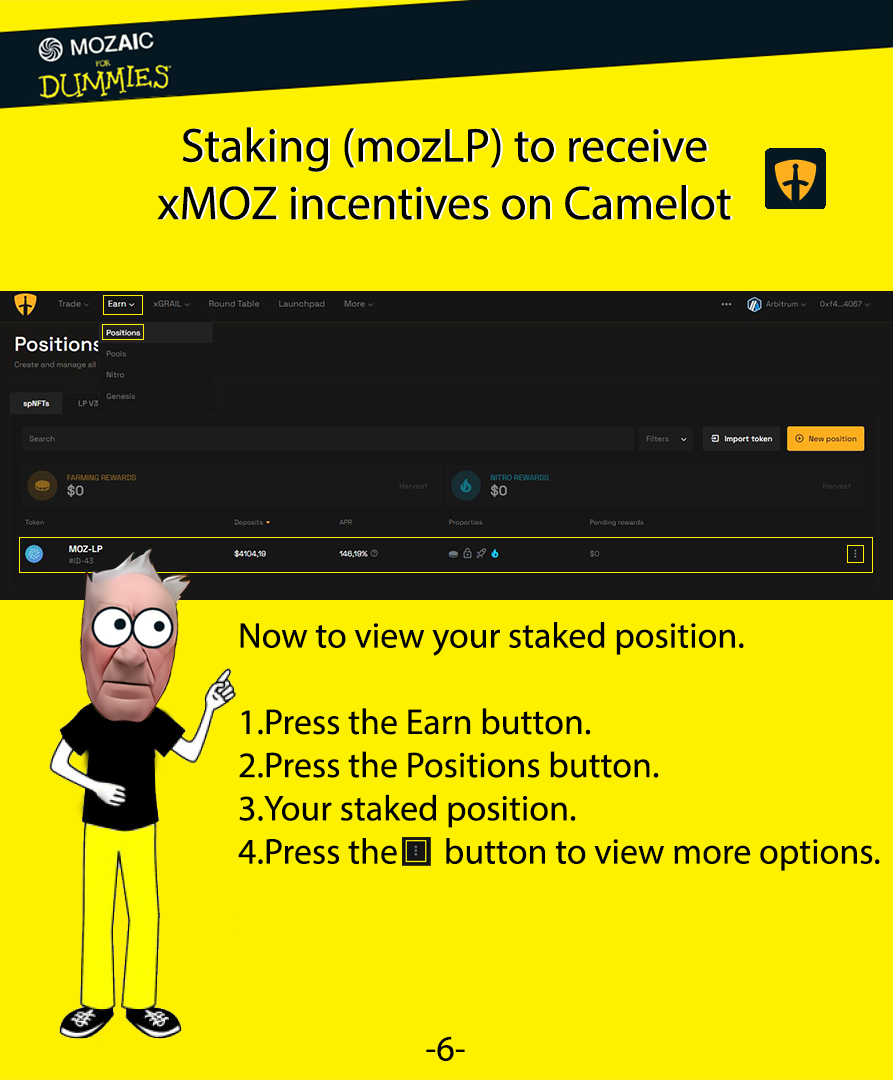
<style>
.page{position:relative;width:893px;height:1080px;background:#fdf100}
.page>*{position:absolute;margin:0}
.t1{font:48px "MyriadPro-Regular";color:#000000}
.t2{font:48px "MyriadPro-Regular"}
.t3{font:36px "MyriadPro-Regular";color:#000000}
</style>
<div class="page">
<p class="t1" style="left:157px;top:127px;width:574px;height:93px;text-align:center">Staking (mozLP) to receive <br>xMOZ incentives on Camelot</p>
<p class="t2" style="left:159px;top:127px;width:574px;height:93px;text-align:center">Staking (mozLP) to receive <br>xMOZ incentives on Camelot</p>
<p class="t3" style="left:238px;top:622px;width:642px;height:249px">Now to view your staked position.<br><br>1.Press the Earn button.<br>2.Press the Positions button.<br>3.Your staked position.<br>4.Press the      button to view more options.</p>
<p class="t3" style="left:426px;top:1036px;width:39px;height:25px">-6-</p>
</div>
